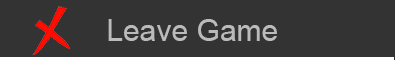
<style>
.page{position:relative;width:395px;height:60px;background:#333333}
.page>*{position:absolute;margin:0}
.t1{font:30px "ArialMT";color:#babbba}
</style>
<div class="page">
<p class="t1" style="left:108px;top:19px;width:169px;height:22px">Leave Game</p>
</div>
